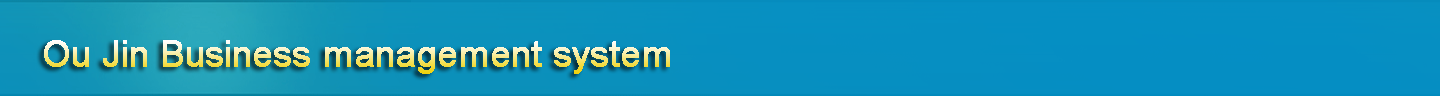
<style>
.page{position:relative;width:1440px;height:96px}
.page>*{position:absolute;margin:0}
.t1{font:36px "ArialMT";font-weight:bold}
</style>
<div class="page">
<p class="t1" style="left:44px;top:40px;width:626px;height:34px">Ou Jin Business management system</p>
</div>
